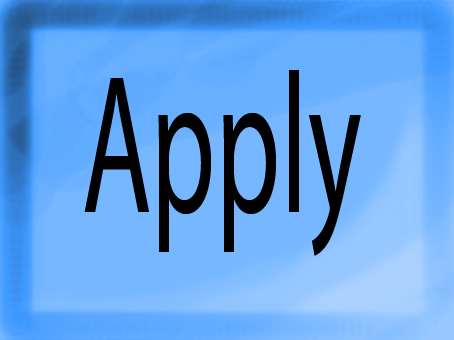
<style>
.page{position:relative;width:454px;height:340px;background:#76b7ff}
.page>*{position:absolute;margin:0}
.t1{font:199.5px "MyriadPro-Regular";color:#000000;scale:0.57 1}
</style>
<div class="page">
<p class="t1" style="left:84px;top:70px;width:277px;height:186px">Apply</p>
</div>
